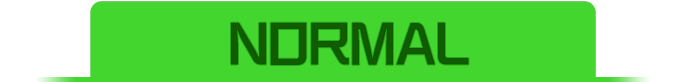
<style>
.page{position:relative;width:684px;height:82px;background:#42d62e}
.page>*{position:absolute;margin:0}
.t1{font:48px "KafuTechnoStd-HV";color:#125c00;scale:0.92 1}
</style>
<div class="page">
<p class="t1" style="left:231px;top:22px;width:238px;height:43px">NORMAL</p>
</div>
